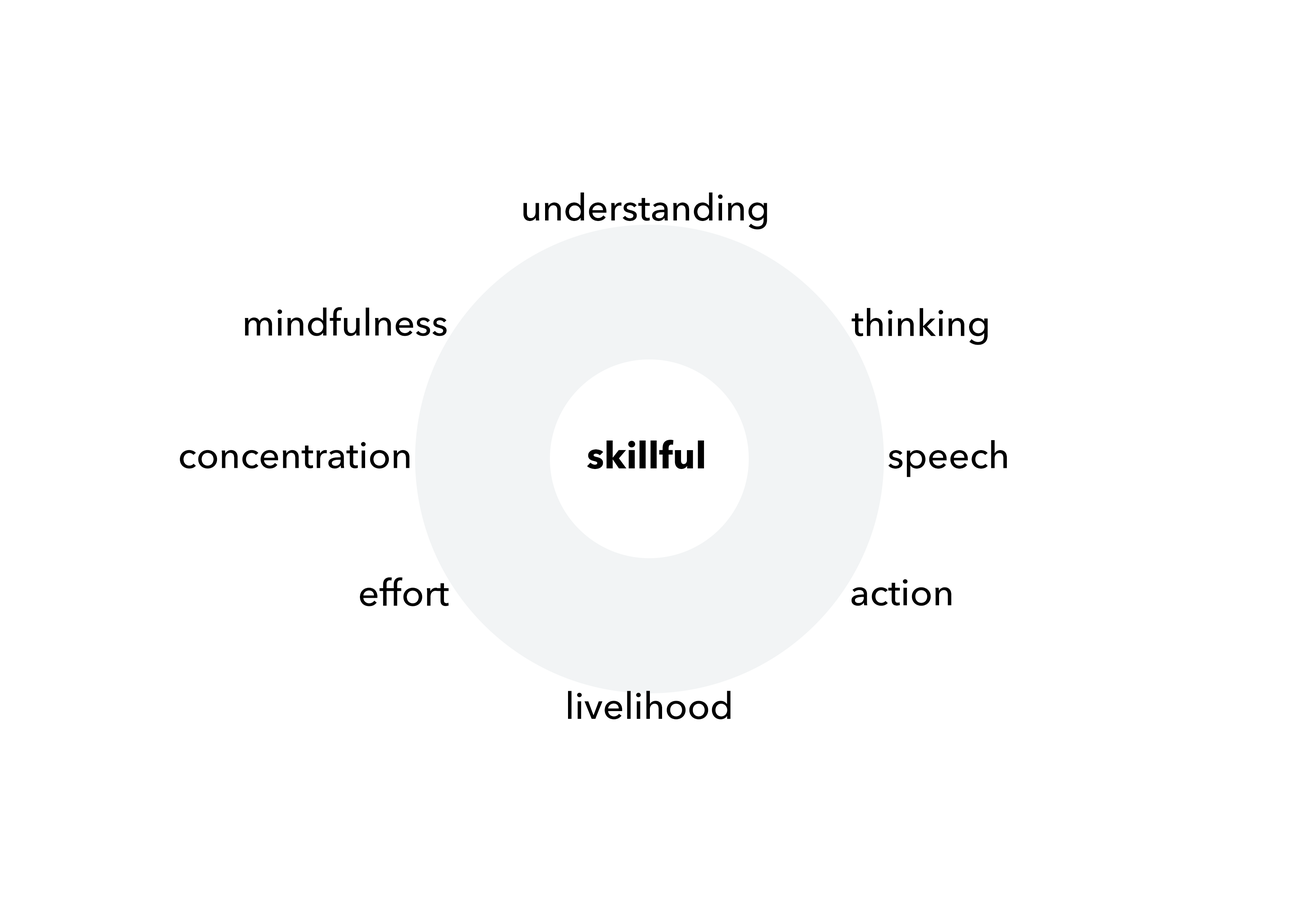
<style>
.page{position:relative;width:1299px;height:918px;background:#ffffff}
.page>*{position:absolute;margin:0}
.t1{font:37px "AvenirNext-Medium";color:#000000}
.t2{font:37px "AvenirNext-Bold";color:#000000}
</style>
<div class="page">
<p class="t1" style="left:523px;top:193px;width:244px;height:37px">understanding</p>
<p class="t1" style="left:245px;top:307px;width:201px;height:29px">mindfulness</p>
<p class="t1" style="left:852px;top:308px;width:136px;height:37px">thinking</p>
<p class="t1" style="left:180px;top:442px;width:229px;height:27px">concentration</p>
<p class="t2" style="left:587px;top:440px;width:117px;height:29px">skillful</p>
<p class="t1" style="left:888px;top:440px;width:119px;height:37px">speech</p>
<p class="t1" style="left:360px;top:577px;width:89px;height:29px">effort</p>
<p class="t1" style="left:851px;top:579px;width:100px;height:27px">action</p>
<p class="t1" style="left:568px;top:691px;width:162px;height:29px">livelihood</p>
</div>
